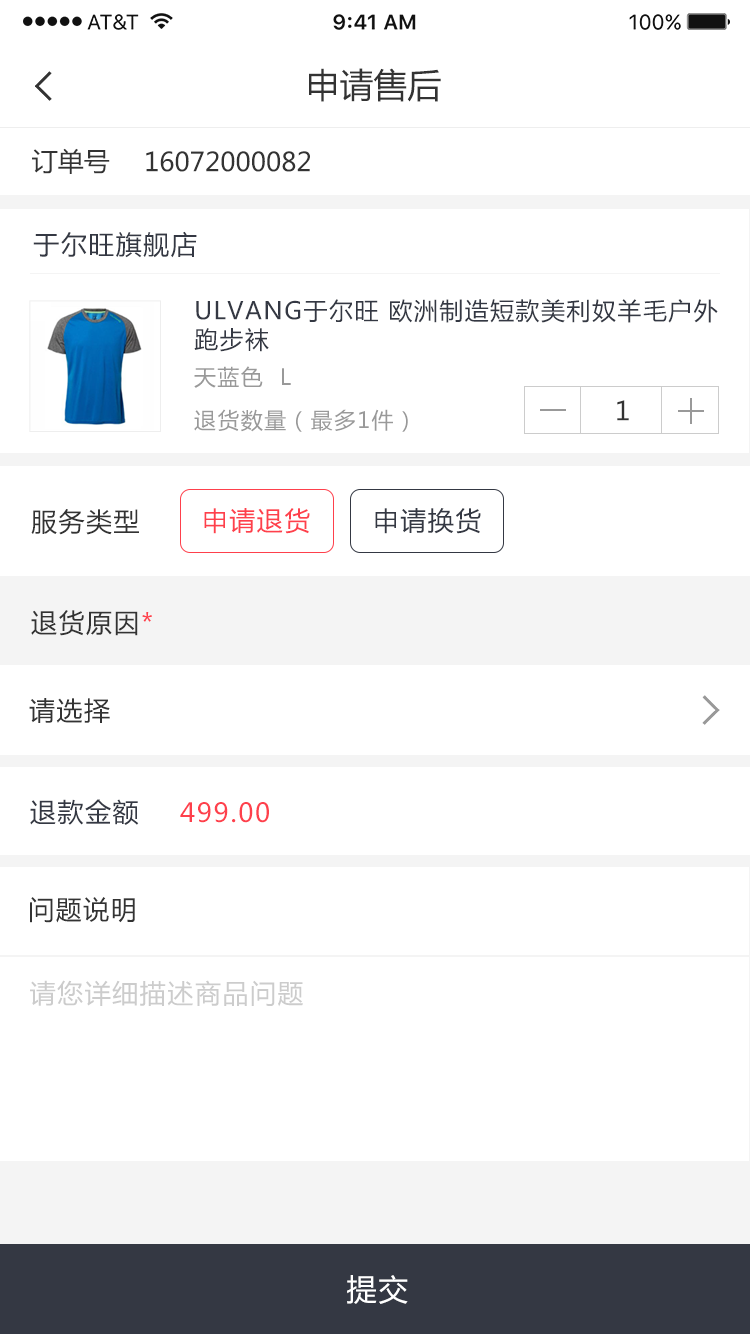
<style>
.page{position:relative;width:750px;height:1334px;background:#ffffff}
.page>*{position:absolute;margin:0}
.t1{font:34px "MicrosoftYaHei";color:#333333}
.t2{font:26px "MicrosoftYaHei";color:#333333}
.t3{font:26px "MicrosoftYaHei";letter-spacing:0.06em;color:#343843}
.t4{font:24px "MicrosoftYaHei";letter-spacing:0.06em;color:#343843}
.t5{font:22px "MicrosoftYaHei";letter-spacing:0.06em;color:#999999}
.t6{font:26px "MicrosoftYaHei";letter-spacing:0.06em;color:#333333}
.t7{font:26px "MicrosoftYaHei";letter-spacing:0.06em;color:#fe404c}
.t8{font:26px "MicrosoftYaHei";letter-spacing:0.06em;color:#cccccc}
.t9{font:30px "MicrosoftYaHei";letter-spacing:0.06em;color:#ffffff}
</style>
<div class="page">
<p class="t1" style="left:309px;top:68px;width:132px;height:34px">申请售后</p>
<p class="t2" style="left:32px;top:148px;width:78px;height:26px">订单号</p>
<p class="t2" style="left:146px;top:151px;width:164px;height:21px">16072000082</p>
<p class="t3" style="left:33px;top:231px;width:164px;height:27px">于尔旺旗舰店</p>
<p class="t4" style="left:194px;top:299px;width:524px;height:53px">ULVANG于尔旺 欧洲制造短款美利奴羊毛户外跑步袜</p>
<p class="t5" style="left:194px;top:366px;width:97px;height:22px">天蓝色  L</p>
<p class="t6" style="left:617px;top:400px;width:12px;height:21px">1</p>
<p class="t5" style="left:194px;top:409px;width:214px;height:23px">退货数量（最多1件）</p>
<p class="t6" style="left:31px;top:509px;width:108px;height:26px">服务类型</p>
<p class="t7" style="left:204px;top:508px;width:106px;height:26px">申请退货</p>
<p class="t3" style="left:375px;top:508px;width:106px;height:26px">申请换货</p>
<p class="t6" style="left:31px;top:610px;width:121px;height:26px">退货原因<span class="t7">*</span></p>
<p class="t6" style="left:29px;top:698px;width:81px;height:25px">请选择</p>
<p class="t3" style="left:30px;top:799px;width:109px;height:26px">退款金额</p>
<p class="t7" style="left:180px;top:802px;width:89px;height:21px">499.00</p>
<p class="t6" style="left:30px;top:897px;width:105px;height:26px">问题说明</p>
<p class="t8" style="left:30px;top:980px;width:273px;height:27px">请您详细描述商品问题</p>
<p class="t9" style="left:347px;top:1275px;width:61px;height:29px">提交</p>
</div>
